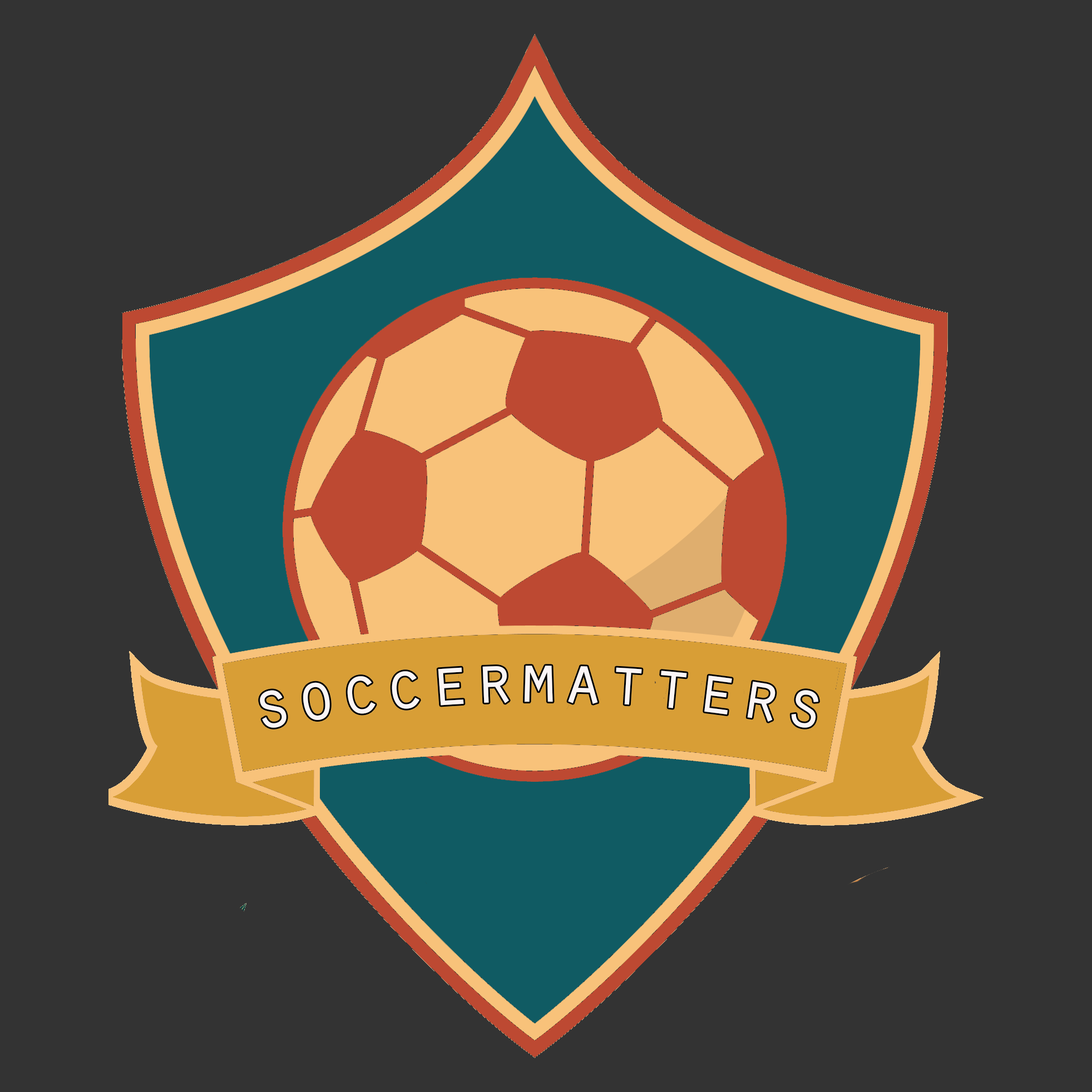
<style>
.page{position:relative;width:1092px;height:1092px;background:#333333}
.page>*{position:absolute;margin:0}
.t1{font:69.5px "OratorStd";letter-spacing:0.02em;color:#fbf5f6}
</style>
<div class="page">
<p class="t1" style="left:260px;top:666px;width:558px;height:62px">soccermatters</p>
</div>
